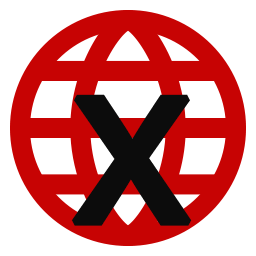
<style>
.page{position:relative;width:256px;height:256px;background:#ffffff}
.page>*{position:absolute;margin:0}
.t1{font:256px "MyriadPro-Regular";color:#0c0c0c;font-weight:bold}
</style>
<div class="page">
<p class="t1" style="left:71px;top:94px;width:121px;height:132px">x</p>
</div>
